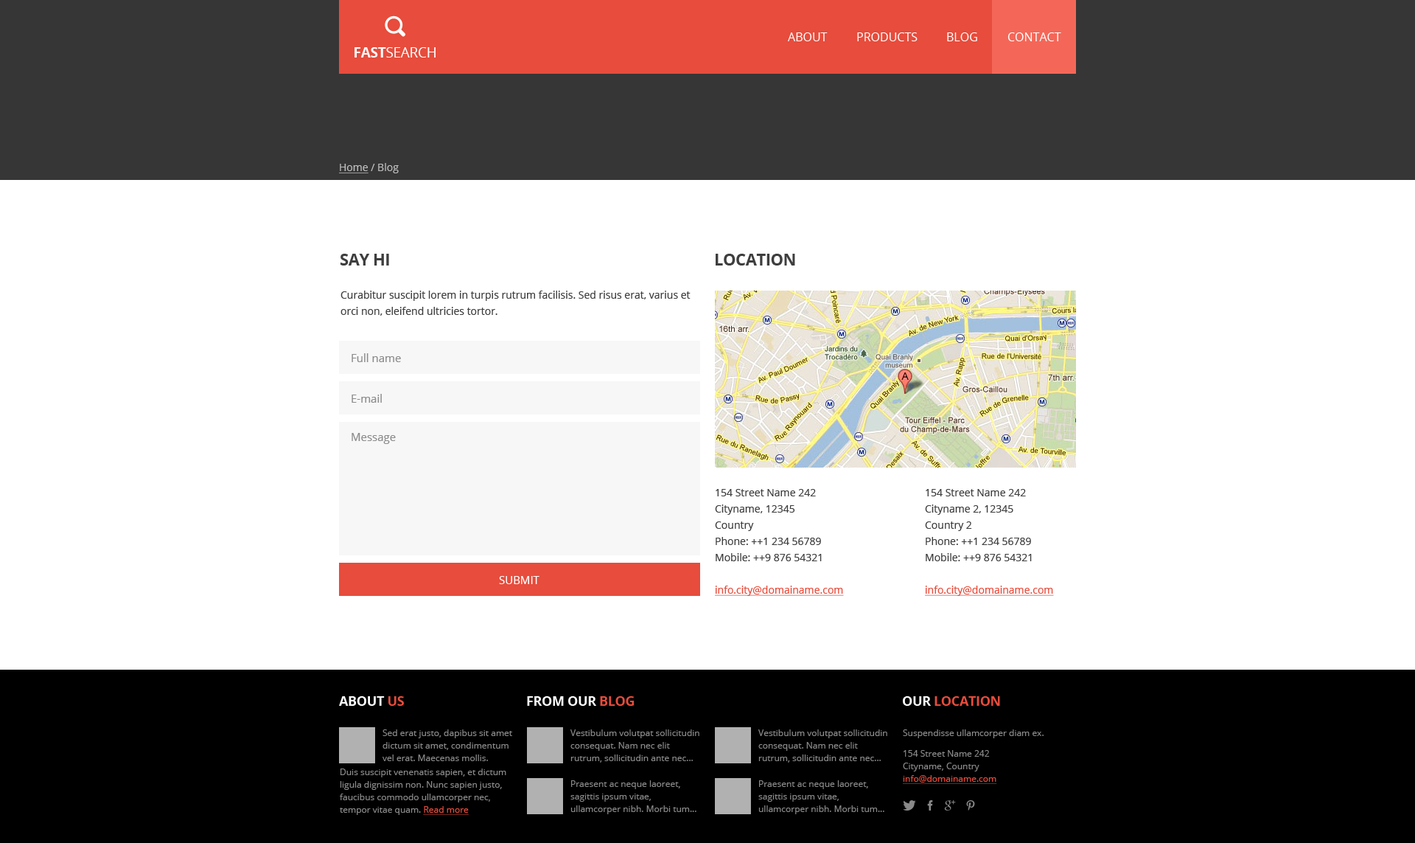
<style>
.page{position:relative;width:1415px;height:843px;background:#ffffff}
.page>*{position:absolute;margin:0}
.t1{font:11.8px "OpenSans";color:#ffffff;text-transform:uppercase}
.t2{font:10.3px "OpenSans";color:#bfbfbf}
.t3{font:10.3px "OpenSans";color:#bfbfbf;text-decoration:underline}
.t4{font:16.2px "OpenSans-Bold";letter-spacing:-0.02em;color:#3e3e3e;text-transform:uppercase}
.t5{font:10.3px/16.2px "OpenSans";color:#3e3e3e}
.t6{font:11.1px "OpenSans";color:#8c8c8c}
.t7{font:10.3px/16.2px "OpenSans";color:#e74c3c;text-decoration:underline}
.t8{font:11.1px "OpenSans";color:#ffffff;text-transform:uppercase}
.t9{font:13.3px "OpenSans-Bold";letter-spacing:-0.02em;color:#ffffff;text-transform:uppercase}
.t10{font:13.3px "OpenSans-Bold";letter-spacing:-0.02em;color:#e74c3c;text-transform:uppercase}
.t11{font:8.8px/12.5px "OpenSans";color:#8a8a8a}
.t12{font:8.8px/20.6px "OpenSans";color:#8a8a8a}
.t13{font:8.8px/12.5px "OpenSans";color:#e74c3c;text-decoration:underline}
.t14{font:8.8px/12.5px "OpenSans";color:#8a8989}
</style>
<div class="page">
<p class="t1" style="left:788px;top:32px;width:40px;height:9px">About</p>
<p class="t1" style="left:857px;top:32px;width:61px;height:9px">products</p>
<p class="t1" style="left:947px;top:32px;width:30px;height:9px">blog</p>
<p class="t1" style="left:1008px;top:32px;width:53px;height:9px">Contact</p>
<p class="t2" style="left:339px;top:163px;width:60px;height:10px"><span class="t3">Home</span> / Blog</p>
<p class="t4" style="left:341px;top:254px;width:48px;height:11px">Say hi</p>
<p class="t4" style="left:716px;top:254px;width:79px;height:11px">Location</p>
<p class="t5" style="left:341px;top:290px;width:350px;height:25px">Curabitur suscipit lorem in turpis rutrum facilisis. Sed risus erat, varius et orci non, eleifend ultricies tortor.</p>
<p class="t6" style="left:352px;top:353px;width:49px;height:9px">Full name</p>
<p class="t6" style="left:352px;top:394px;width:30px;height:8px">E-mail</p>
<p class="t6" style="left:352px;top:433px;width:44px;height:11px">Message</p>
<p class="t5" style="left:715px;top:489px;width:129px;height:107px">154 Street Name 242<br>Cityname, 12345<br>Country<br>Phone: ++1 234 56789<br>Mobile: ++9 876 54321<br><br><span class="t7">info.city@domainame.com</span></p>
<p class="t5" style="left:925px;top:489px;width:129px;height:107px">154 Street Name 242<br>Cityname 2, 12345<br>Country 2<br>Phone: ++1 234 56789<br>Mobile: ++9 876 54321<br><br><span class="t7">info.city@domainame.com</span></p>
<p class="t8" style="left:499px;top:576px;width:41px;height:8px">Submit</p>
<p class="t9" style="left:339px;top:696px;width:65px;height:9px">About <span class="t10">us</span></p>
<p class="t9" style="left:527px;top:696px;width:108px;height:9px">From our <span class="t10">blog</span></p>
<p class="t10" style="left:903px;top:696px;width:97px;height:9px"><span class="t9">our </span>Location</p>
<p class="t11" style="left:383px;top:729px;width:129px;height:32px">Sed erat justo, dapibus sit amet dictum sit amet, condimentum vel erat. Maecenas mollis. tincidunt sollicitudin</p>
<p class="t11" style="left:571px;top:729px;width:129px;height:33px">Vestibulum volutpat sollicitudin consequat. Nam nec elit rutrum, sollicitudin ante nec...</p>
<p class="t11" style="left:759px;top:729px;width:129px;height:33px">Vestibulum volutpat sollicitudin consequat. Nam nec elit rutrum, sollicitudin ante nec...</p>
<p class="t11" style="left:903px;top:729px;width:141px;height:55px">Suspendisse ullamcorper diam ex.<br><span class="t12">154 Street Name 242<br></span>Cityname, Country<br><span class="t13">info@domainame.com</span></p>
<p class="t11" style="left:340px;top:768px;width:166px;height:47px">Duis suscipit venenatis sapien, et dictum ligula dignissim non. Nunc sapien justo, faucibus commodo ullamcorper nec, tempor vitae quam. <span class="t13">Read more</span></p>
<p class="t14" style="left:571px;top:780px;width:126px;height:34px">Praesent ac neque laoreet, sagittis ipsum vitae, ullamcorper nibh. Morbi tum... orci li</p>
<p class="t14" style="left:759px;top:780px;width:126px;height:34px">Praesent ac neque laoreet, sagittis ipsum vitae, ullamcorper nibh. Morbi tum... orci li</p>
</div>
